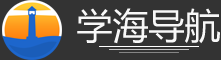
<style>
.page{position:relative;width:221px;height:60px;background:#333333}
.page>*{position:absolute;margin:0}
.t1{font:36px "MicrosoftYaHei";color:#f8f8f8}
</style>
<div class="page">
<p class="t1" style="left:77px;top:8px;width:143px;height:36px">学海导航</p>
</div>
